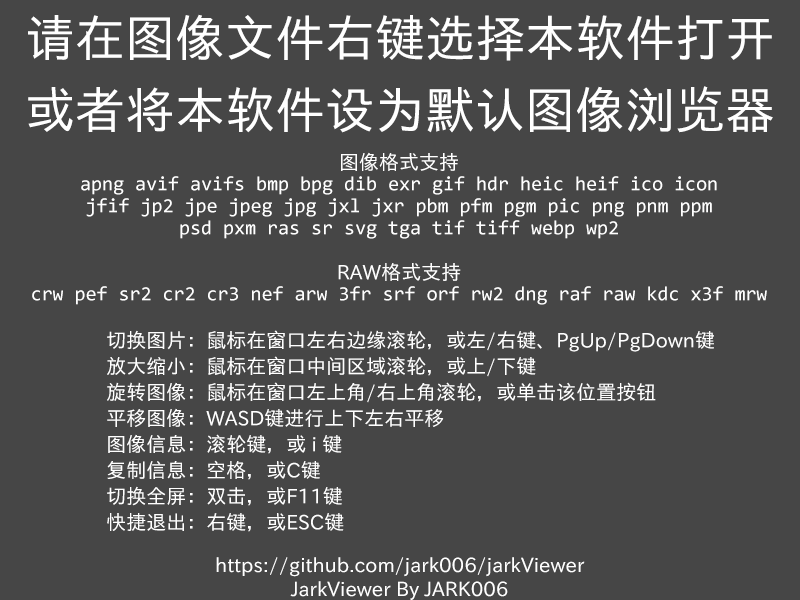
<style>
.page{position:relative;width:800px;height:600px;background:#464646}
.page>*{position:absolute;margin:0}
.t1{font:50px/72px "LXGWNeoXiHei";color:#ffffff}
.t2{font:20px/22px "Consolas";color:#ffffff}
.t3{font:20px/22px "LXGWNeoXiHei";color:#ffffff}
.t4{font:20px/24px "Consolas";color:#ffffff}
.t5{font:20px/26px "LXGWNeoXiHei";color:#ffffff}
.t6{font:20px/24px "LXGWNeoXiHei";color:#ffffff}
</style>
<div class="page">
<p class="t1" style="left:28px;top:14px;width:745px;height:119px;text-align:center">请在图像文件右键选择本软件打开<br>或者将本软件设为默认图像浏览器</p>
<p class="t2" style="left:32px;top:152px;width:735px;height:153px;text-align:center"><span class="t3">图像格式支持<br></span>apng avif avifs bmp bpg dib exr gif hdr heic heif ico icon<br>jfif jp2 jpe jpeg jpg jxl jxr pbm pfm pgm pic png pnm ppm<br>psd pxm ras sr svg tga tif tiff webp wp2<br><span class="t3"><br>RAW格式支持<br></span><span class="t4">crw pef sr2 cr2 cr3 nef arw 3fr srf orf rw2 dng raf raw kdc x3f mrw</span></p>
<p class="t5" style="left:107px;top:330px;width:607px;height:202px">切换图片：鼠标在窗口左右边缘滚轮，或左/右键、PgUp/PgDown键<br>放大缩小：鼠标在窗口中间区域滚轮，或上/下键<br>旋转图像：鼠标在窗口左上角/右上角滚轮，或单击该位置按钮<br>平移图像：WASD键进行上下左右平移<br>图像信息：滚轮键，或 i 键<br>复制信息：空格，或C键<br>切换全屏：双击，或F11键<br>快捷退出：右键，或ESC键</p>
<p class="t6" style="left:216px;top:557px;width:369px;height:43px;text-align:center">https://github.com/jark006/jarkViewer<br>JarkViewer By JARK006</p>
</div>
